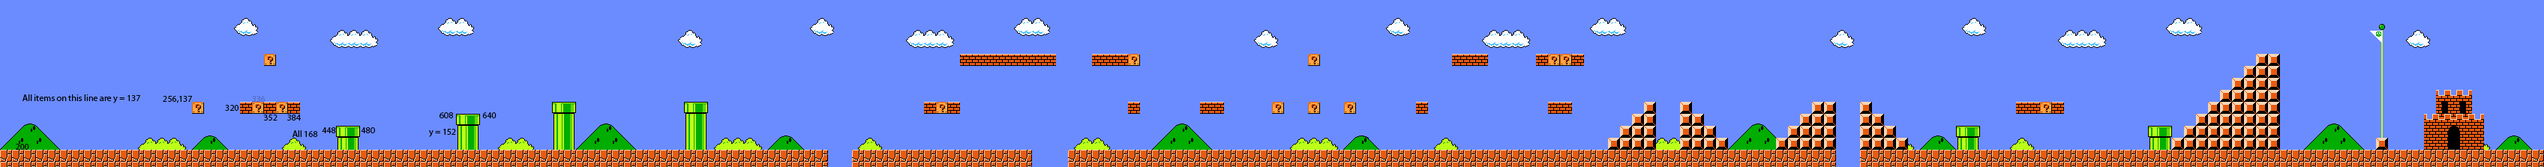
<style>
.page{position:relative;width:2544px;height:167px;background:#6b8cff}
.page>*{position:absolute;margin:0}
.t1{font:9px "MyriadPro-Regular";color:#000000}
.t2{font:9px "MyriadPro-Regular";color:#536eca}
</style>
<div class="page">
<p class="t1" style="left:22px;top:94px;width:118px;height:10px">All items on this line are y = 137</p>
<p class="t1" style="left:163px;top:96px;width:29px;height:8px">256,137</p>
<p class="t2" style="left:252px;top:96px;width:14px;height:6px">336</p>
<p class="t1" style="left:225px;top:105px;width:13px;height:6px">320</p>
<p class="t1" style="left:440px;top:112px;width:13px;height:6px">608</p>
<p class="t1" style="left:482px;top:112px;width:14px;height:6px">640</p>
<p class="t1" style="left:263px;top:115px;width:15px;height:6px">352</p>
<p class="t1" style="left:287px;top:115px;width:15px;height:6px">384</p>
<p class="t1" style="left:292px;top:130px;width:26px;height:7px">All 168</p>
<p class="t1" style="left:322px;top:128px;width:14px;height:6px">448</p>
<p class="t1" style="left:361px;top:128px;width:14px;height:6px">480</p>
<p class="t1" style="left:429px;top:129px;width:27px;height:8px">y = 152</p>
<p class="t1" style="left:16px;top:144px;width:13px;height:6px">200</p>
</div>
